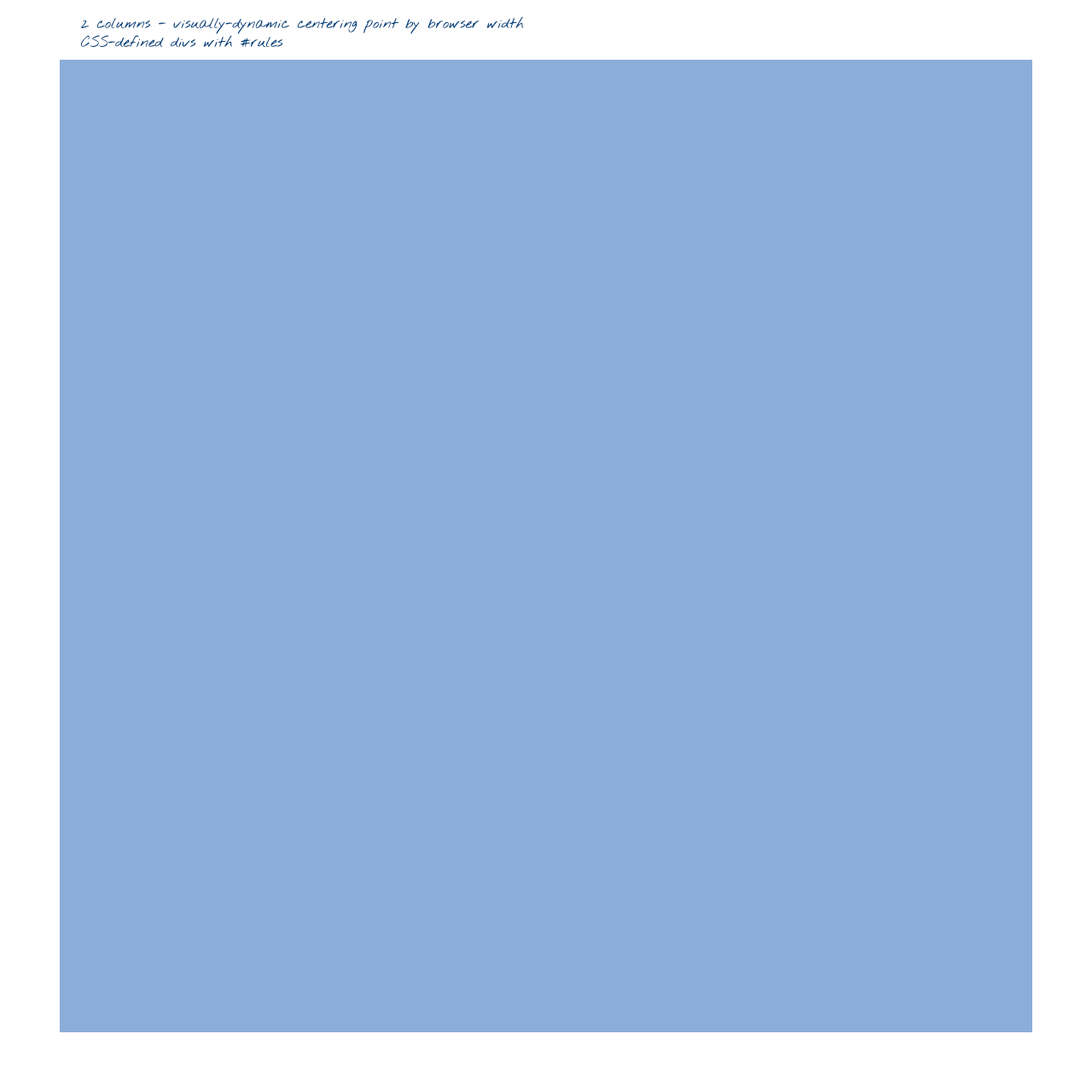
<style>
.page{position:relative;width:1092px;height:1092px;background:#8baed8}
.page>*{position:absolute;margin:0}
.t1{font:11.9px "NothingYouCouldDo";color:#004580}
</style>
<div class="page">
<p class="t1" style="left:81px;top:16px;width:443px;height:18px">2 columns - visually-dynamic centering point by browser width</p>
<p class="t1" style="left:80px;top:35px;width:203px;height:12px">CSS-defined divs with #rules</p>
</div>
